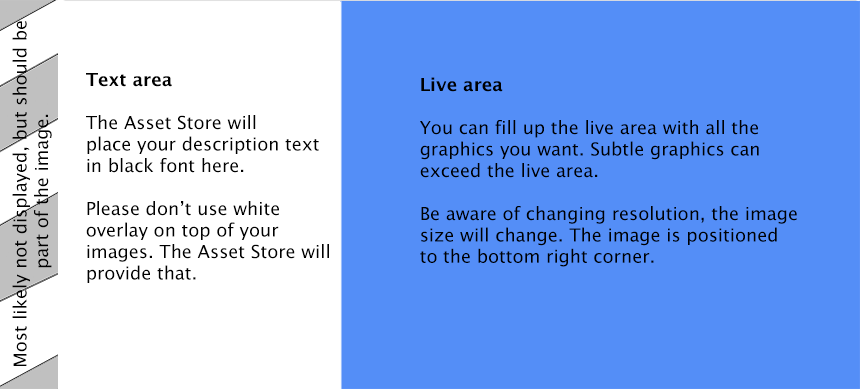
<style>
.page{position:relative;width:860px;height:389px;background:#548ef7}
.page>*{position:absolute;margin:0}
.t1{font:18px "LucidaGrande";color:#000000}
.t2{font:17.9px "LucidaGrande";color:#000000}
.t3{font:17.9px "LucidaGrande-Bold";color:#000000}
</style>
<div class="page">
<p class="t1" style="left:12px;top:21px;width:40px;height:345px;text-align:center;rotate:-90deg">Most likely not displayed, but should be <br>part of the image.</p>
<p class="t2" style="left:86px;top:73px;width:243px;height:210px"><span class="t3">Text area<br></span><br>The Asset Store will<br>place your description text <br>in black font here.<br><br>Please don’t use white<br>overlay on top of your <br>images. The Asset Store will<br>provide that.</p>
<p class="t2" style="left:420px;top:77px;width:377px;height:190px"><span class="t3">Live area<br></span><br>You can fill up the live area with all the<br>graphics you want. Subtle graphics can<br>exceed the live area.<br><br>Be aware of changing resolution, the image<br>size will change. The image is positioned<br>to the bottom right corner.</p>
</div>
